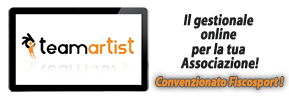
<style>
.page{position:relative;width:289px;height:98px;background:#ffffff}
.page>*{position:absolute;margin:0}
.t1{font:15.6px "MyriadPro-Bold";color:#303133;font-weight:bold;font-style:italic;scale:0.77 1}
.t2{font:13px "MyriadPro-Bold";color:#f48f2a;font-weight:bold;font-style:italic;scale:0.77 1}
</style>
<div class="page">
<p class="t1" style="left:180px;top:14px;width:79px;height:55px;text-align:center">Il gestionale <br>online <br>per la tua <br>Associazione!</p>
<p class="t2" style="left:156px;top:76px;width:128px;height:13px">Convenzionato Fiscosport !</p>
</div>
